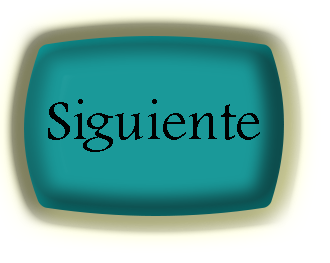
<style>
.page{position:relative;width:330px;height:263px;background:#1a9999}
.page>*{position:absolute;margin:0}
.t1{font:58.3px "FootlightMTLight";color:#000000}
</style>
<div class="page">
<p class="t1" style="left:48px;top:99px;width:212px;height:53px">Siguiente</p>
</div>
